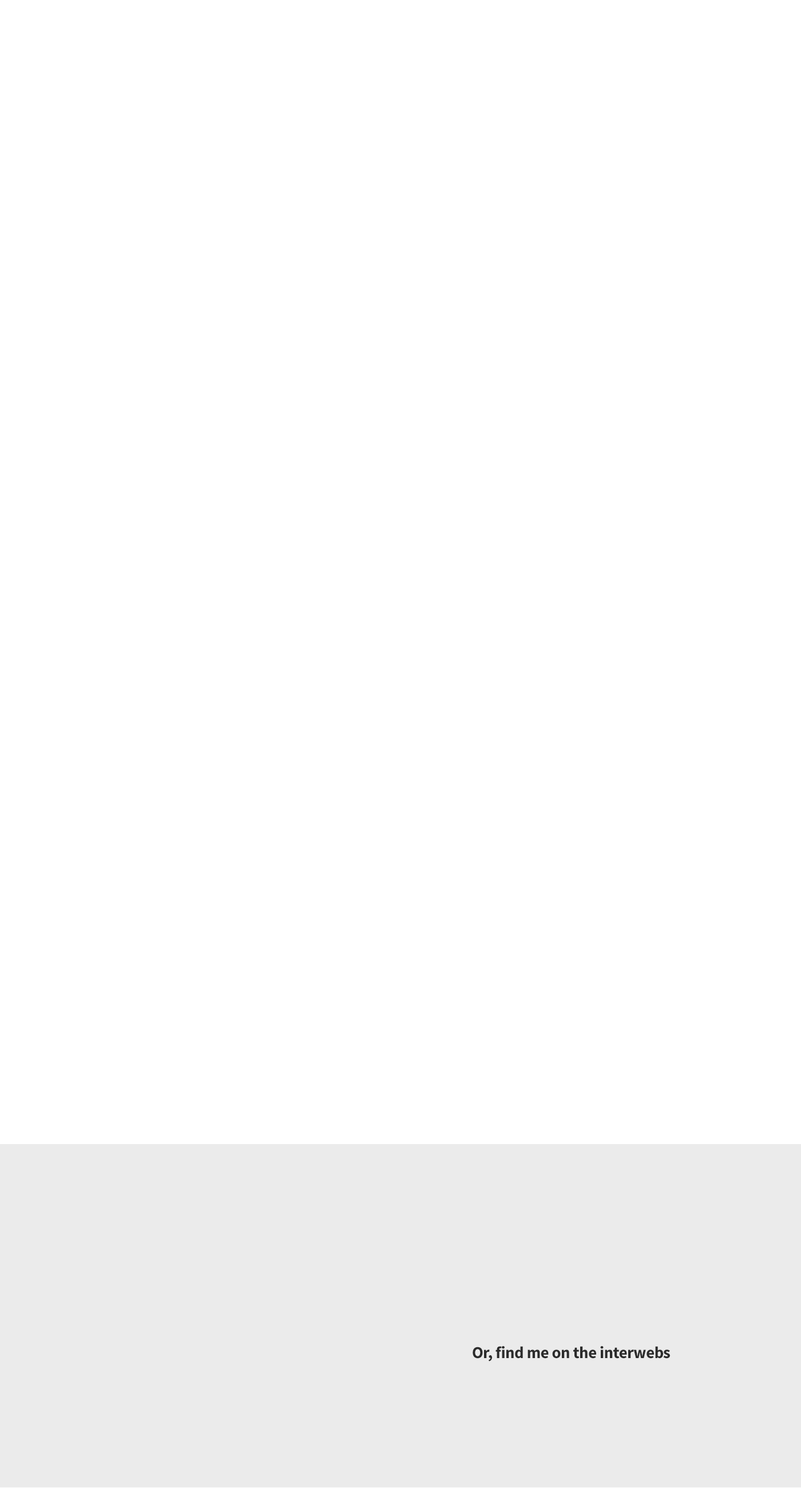
<style>
.page{position:relative;width:801px;height:1488px;background:#ffffff}
.page>*{position:absolute;margin:0}
.t1{font:16.6px "SourceSansPro-Bold";letter-spacing:-0.02em;color:#2b2b2b}
</style>
<div class="page">
<p class="t1" style="left:473px;top:1346px;width:197px;height:16px">Or, find me on the interwebs</p>
</div>
